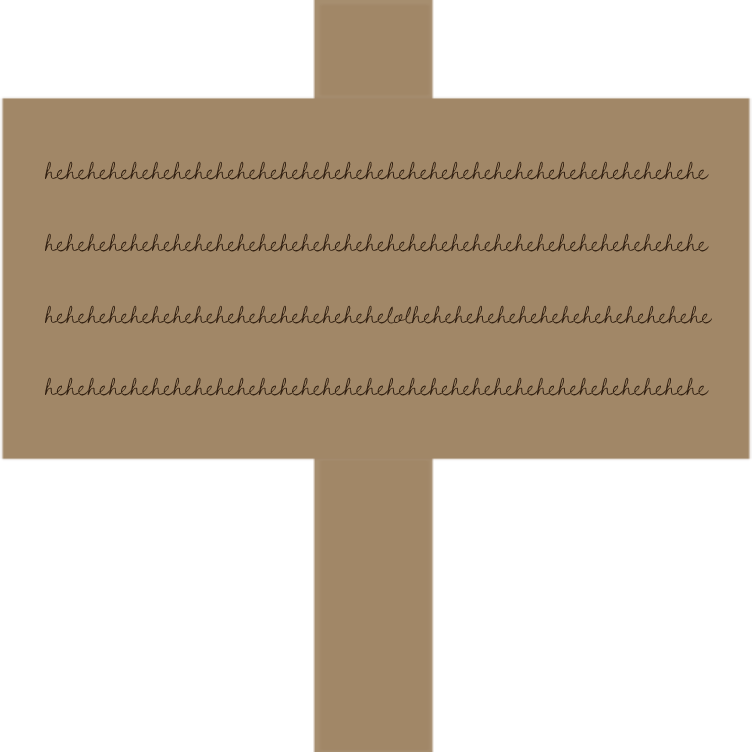
<style>
.page{position:relative;width:752px;height:752px;background:#a18767}
.page>*{position:absolute;margin:0}
.t1{font:30px "DawningofaNewDay";color:#322012}
</style>
<div class="page">
<p class="t1" style="left:44px;top:161px;width:669px;height:235px">hehehehehehehehehehehehehehehehehehehehehehehehehehehehehehehe<br><br>hehehehehehehehehehehehehehehehehehehehehehehehehehehehehehehe<br><br>hehehehehehehehehehehehehehehehelolhehehehehehehehehehehehehehe<br><br>hehehehehehehehehehehehehehehehehehehehehehehehehehehehehehehe</p>
</div>
